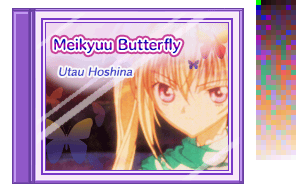
<style>
.page{position:relative;width:296px;height:192px}
.page>*{position:absolute;margin:0}
.t1{font:13px "HummingStd-B";letter-spacing:0.02em}
.t2{font:10px "HummingStd-D";letter-spacing:0.02em;color:#4848c8;font-style:italic}
</style>
<div class="page">
<p class="t1" style="left:54px;top:38px;width:127px;height:16px">Meikyuu Butterfly</p>
<p class="t2" style="left:59px;top:66px;width:74px;height:10px">Utau Hoshina</p>
</div>
